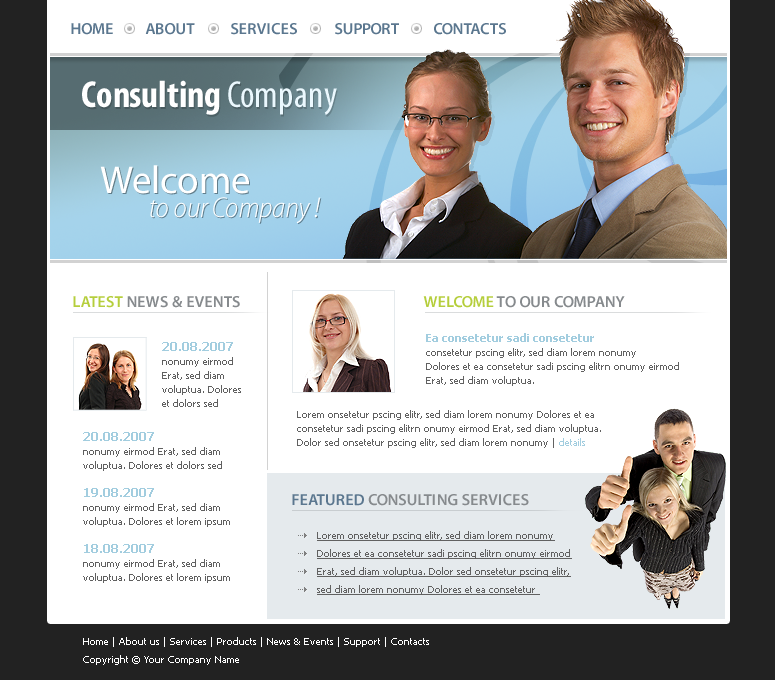
<style>
.page{position:relative;width:775px;height:680px;background:#ffffff}
.page>*{position:absolute;margin:0}
.t1{font:16px "MyriadPro-Semibold";color:#5b778f;text-transform:uppercase}
.t2{font:38px "MyriadPro-BoldCond";color:#ffffff}
.t3{font:38px "MyriadPro-Cond";color:#ebf8fe}
.t4{font:29px/24.2px "MyriadPro-LightSemiCnIt";color:#ffffff}
.t5{font:39px/24.2px "MyriadPro-Regular";color:#ffffff}
.t6{font:16px "MyriadPro-Semibold";color:#868a8d;text-transform:uppercase}
.t7{font:16px "MyriadPro-Semibold";color:#b5ce3c;text-transform:uppercase}
.t8{font:10px/14px "Tahoma";color:#606060}
.t9{font:12px/14px "Tahoma-Bold";color:#a2cddf}
.t10{font:10px/14px "Tahoma";color:#616161}
.t11{font:11px/14px "Tahoma-Bold";color:#a2cddf}
.t12{font:11px/14px "Tahoma-Bold";color:#616161}
.t13{font:10px/14px "Tahoma";color:#a2cddf}
.t14{font:10px/18px "Tahoma";color:#616161;text-decoration:underline}
.t15{font:11px/18px "Tahoma-Bold";color:#616161;text-decoration:underline}
.t16{font:10px/18px "Tahoma";color:#ffffff}
</style>
<div class="page">
<p class="t1" style="left:71px;top:23px;width:42px;height:12px">home</p>
<p class="t1" style="left:145px;top:23px;width:50px;height:12px">about</p>
<p class="t1" style="left:231px;top:23px;width:66px;height:12px">services</p>
<p class="t1" style="left:335px;top:23px;width:64px;height:12px">support</p>
<p class="t1" style="left:434px;top:23px;width:72px;height:12px">contacts</p>
<p class="t2" style="left:82px;top:80px;width:255px;height:35px">Consulting <span class="t3">Company</span></p>
<p class="t4" style="left:100px;top:165px;width:221px;height:59px"><span class="t5">Welcome <br></span>          to our Company !</p>
<p class="t6" style="left:73px;top:296px;width:167px;height:12px"><span class="t7">LATEST </span>NEWS &amp; EVENTS</p>
<p class="t6" style="left:423px;top:296px;width:202px;height:12px"><span class="t7">welcome </span>to our company</p>
<p class="t8" style="left:162px;top:342px;width:79px;height:65px"><span class="t9">20.08.2007<br></span>nonumy eirmod Erat, sed diam voluptua. Dolores et dolors sed</p>
<p class="t10" style="left:426px;top:333px;width:253px;height:53px"><span class="t11">Ea consetetur sadi consetetur <br></span>consetetur pscing elitr, sed diam lorem nonumy <br>Dolores et ea consetetur sadi pscing elitrn onumy eirmod Erat, sed diam voluptua.</p>
<p class="t10" style="left:297px;top:410px;width:304px;height:38px"><span class="t12"><br></span>Lorem onsetetur pscing elitr, sed diam lorem nonumy Dolores et ea consetetur sadi pscing elitrn onumy eirmod Erat, sed diam voluptua. <br>Dolor sed onsetetur pscing elitr, sed diam lorem nonumy | <span class="t13">details</span></p>
<p class="t8" style="left:83px;top:432px;width:147px;height:151px"><span class="t9">20.08.2007<br></span>nonumy eirmod Erat, sed diam voluptua. Dolores et dolors sed<br><br><span class="t9">19.08.2007<br></span>nonumy eirmod Erat, sed diam voluptua. Dolores et lorem ipsum <br><br><span class="t9">18.08.2007<br></span>nonumy eirmod Erat, sed diam voluptua. Dolores et lorem ipsum</p>
<p class="t6" style="left:292px;top:494px;width:237px;height:12px"><span class="t1">FEATURED </span>CONSULTING SERVICES</p>
<p class="t14" style="left:317px;top:531px;width:255px;height:64px"><span class="t15"><br></span>Lorem onsetetur pscing elitr, sed diam lorem nonumy Dolores et ea consetetur sadi pscing elitrn onumy eirmod Erat, sed diam voluptua. Dolor sed onsetetur pscing elitr, sed diam lorem nonumy Dolores et ea consetetur</p>
<p class="t16" style="left:83px;top:637px;width:346px;height:28px">Home | About us | Services | Products | News &amp; Events | Support | Contacts<br>Copyright © Your Company Name</p>
</div>
